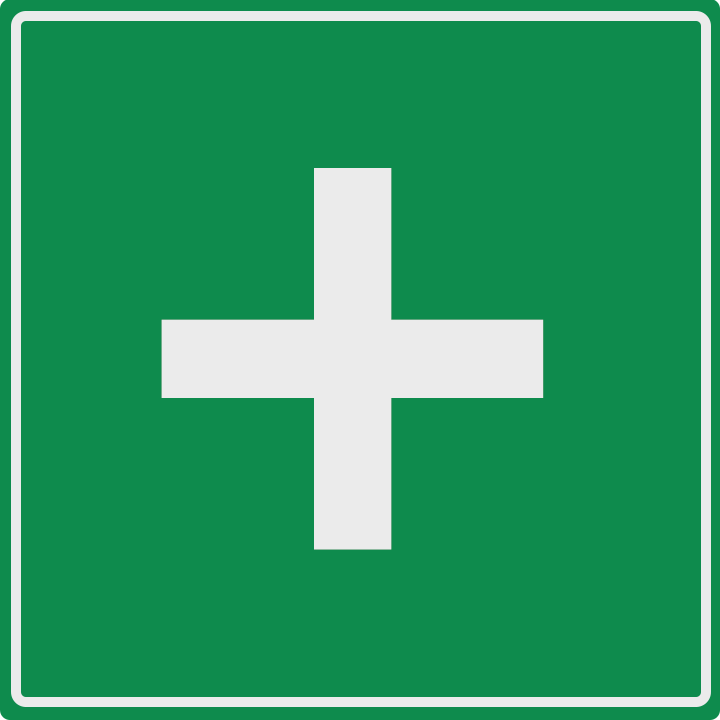
<style>
.page{position:relative;width:720px;height:720px;background:#0e8b4d}
.page>*{position:absolute;margin:0}
.t1{font:877.8px "ArgentumSans-Medium";color:#ebebeb}
</style>
<div class="page">
<p class="t1" style="left:161px;top:168px;width:383px;height:382px">+</p>
</div>
